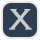
<style>
.page{position:relative;width:40px;height:40px;background:#2c3e50}
.page>*{position:absolute;margin:0}
.t1{font:30.7px "CopperplateGothic-Light";color:#c9ccce;font-weight:bold;scale:1.03 1}
</style>
<div class="page">
<p class="t1" style="left:9px;top:9px;width:23px;height:21px">X</p>
</div>
